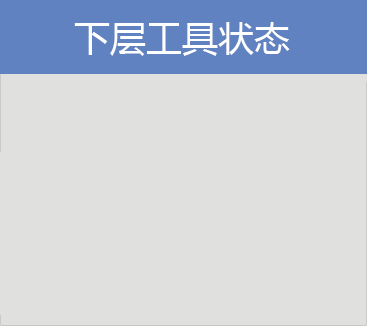
<style>
.page{position:relative;width:367px;height:326px;background:#e0e0df}
.page>*{position:absolute;margin:0}
.t1{font:36px "MicrosoftYaHei";color:#ffffff}
</style>
<div class="page">
<p class="t1" style="left:74px;top:22px;width:216px;height:34px">下层工具状态</p>
</div>
